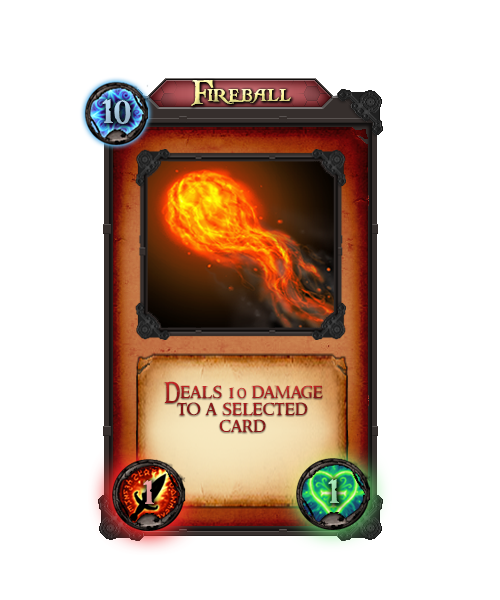
<style>
.page{position:relative;width:500px;height:600px;background:#ffffff}
.page>*{position:absolute;margin:0}
.t1{font:36px "PiecesofEight"}
.t2{font:36px "PiecesofEight";color:#a4c4da}
.t3{font:20px/17px "RingbearerMedium"}
.t4{font:36px "PiecesofEight";color:#efa4a4}
.t5{font:36px "PiecesofEight";color:#a8eab9}
</style>
<div class="page">
<p class="t1" style="left:191px;top:80px;width:100px;height:26px">Fireball</p>
<p class="t2" style="left:102px;top:99px;width:29px;height:25px">10</p>
<p class="t3" style="left:164px;top:381px;width:159px;height:52px;text-align:center">Deals 10 damage to a selected card</p>
<p class="t4" style="left:143px;top:480px;width:11px;height:24px">1</p>
<p class="t5" style="left:328px;top:479px;width:11px;height:24px">1</p>
</div>
